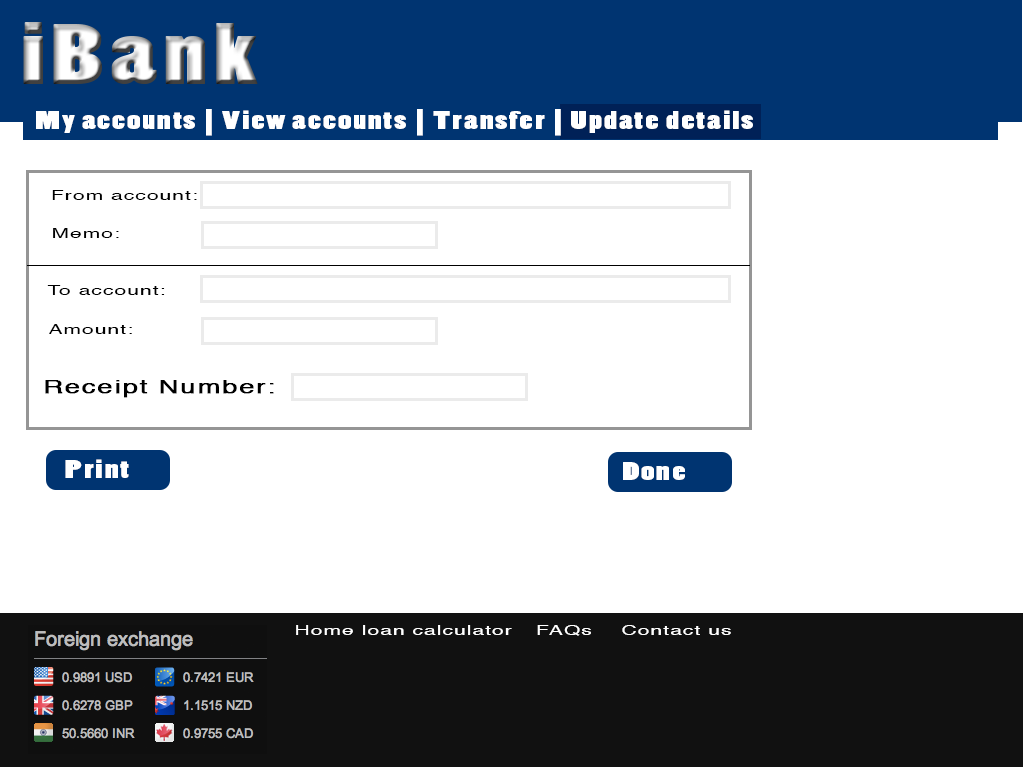
<style>
.page{position:relative;width:1024px;height:768px;background:#ffffff}
.page>*{position:absolute;margin:0}
.t1{font:24px "PoplarStd";letter-spacing:0.05em;color:#ffffff;scale:1.5 1}
.t2{font:14px "Helvetica";letter-spacing:0.05em;color:#000000;scale:1.5 1}
.t3{font:18px "Helvetica";letter-spacing:0.05em;color:#000000;font-weight:bold;scale:1.5 1}
.t4{font:14px "Helvetica";letter-spacing:0.05em;color:#ffffff;scale:1.5 1}
</style>
<div class="page">
<p class="t1" style="left:36px;top:109px;width:717px;height:27px">My accounts | View accounts | Transfer | Update details</p>
<p class="t2" style="left:52px;top:190px;width:145px;height:10px">From account:</p>
<p class="t2" style="left:53px;top:228px;width:66px;height:10px">Memo:</p>
<p class="t2" style="left:47px;top:285px;width:118px;height:10px">To account:</p>
<p class="t2" style="left:49px;top:324px;width:83px;height:10px">Amount:</p>
<p class="t3" style="left:45px;top:380px;width:229px;height:18px">Receipt Number:</p>
<p class="t1" style="left:65px;top:459px;width:64px;height:19px">Print</p>
<p class="t1" style="left:623px;top:462px;width:62px;height:18px">Done</p>
<p class="t4" style="left:296px;top:625px;width:216px;height:10px">Home loan calculator</p>
<p class="t4" style="left:537px;top:625px;width:54px;height:11px">FAQs</p>
<p class="t4" style="left:622px;top:625px;width:109px;height:10px">Contact us</p>
</div>
